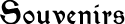
<style>
.page{position:relative;width:125px;height:24px;background:#ffffff}
.page>*{position:absolute;margin:0}
.t1{font:24px "Kelmscott-Regular";letter-spacing:0.05em;color:#000000}
.t2{font:30px "Kelmscott-Regular";letter-spacing:0.05em;color:#000000}
</style>
<div class="page">
<p class="t1" style="left:0px;top:0px;width:125px;height:24px"><span class="t2">S</span>ouvenirs</p>
</div>
